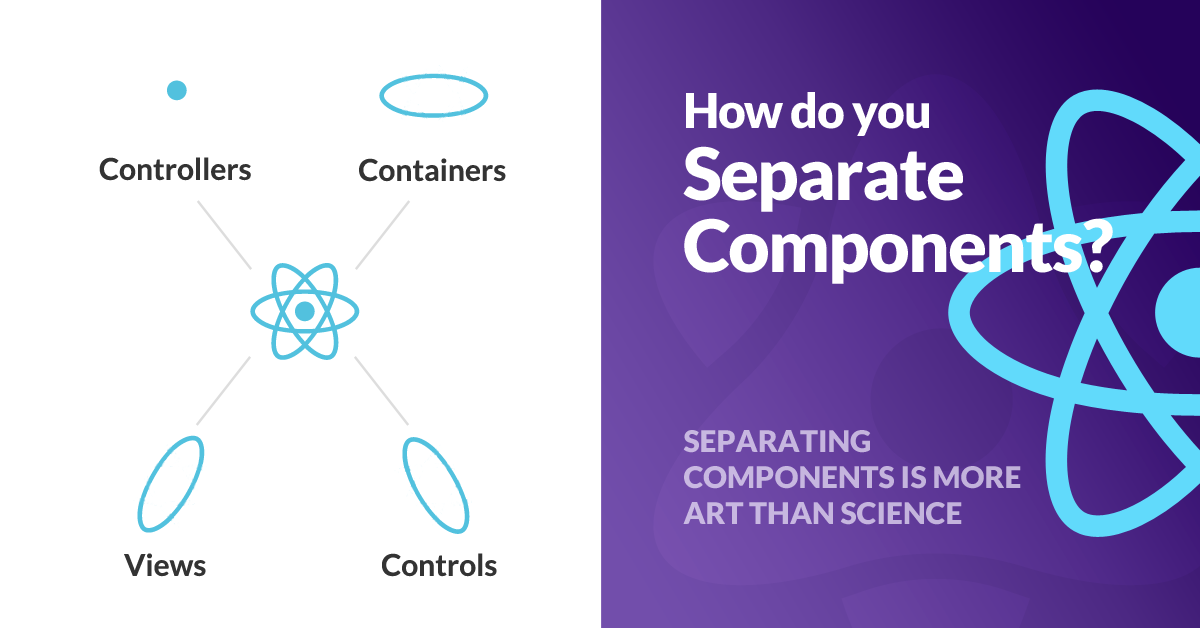
<style>
.page{position:relative;width:1200px;height:628px;background:#ffffff}
.page>*{position:absolute;margin:0}
.t1{font:72px/72px "Lato-Black";letter-spacing:-0.025em;color:#ffffff}
.t2{font:48px "Lato-Black";letter-spacing:-0.025em;color:#ffffff}
.t3{font:30px "Lato-Bold";color:#333333}
.t4{font:30px "Lato-Black";color:#c6b6df}
</style>
<div class="page">
<p class="t1" style="left:683px;top:92px;width:430px;height:192px"><span class="t2">How do you<br></span>Separate<br>Components?</p>
<p class="t3" style="left:99px;top:157px;width:152px;height:24px">Controllers</p>
<p class="t3" style="left:359px;top:158px;width:147px;height:24px">Containers</p>
<p class="t4" style="left:683px;top:430px;width:338px;height:95px">SEPARATING<br>COMPONENTS IS MORE<br>ART THAN SCIENCE</p>
<p class="t3" style="left:124px;top:553px;width:82px;height:24px">Views</p>
<p class="t3" style="left:382px;top:553px;width:115px;height:24px">Controls</p>
</div>
